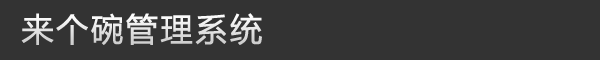
<style>
.page{position:relative;width:600px;height:60px;background:#333333}
.page>*{position:absolute;margin:0}
.t1{font:32px "MicrosoftYaHei";letter-spacing:0.06em;color:#e7e7e7;font-weight:bold}
</style>
<div class="page">
<p class="t1" style="left:21px;top:13px;width:241px;height:32px">来个碗管理系统</p>
</div>
